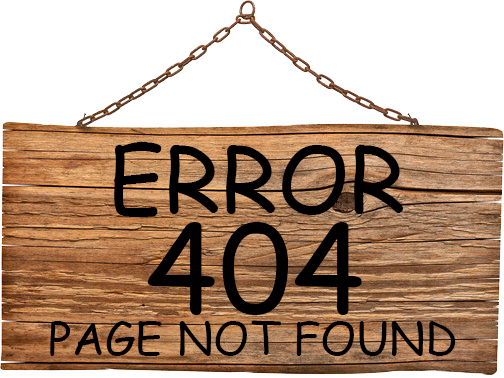
<style>
.page{position:relative;width:504px;height:378px;background:#ffffff}
.page>*{position:absolute;margin:0}
.t1{font:90px "ComicSansMS";color:#000000;text-transform:uppercase}
.t2{font:120px "ComicSansMS";color:#000000;text-transform:uppercase}
.t3{font:45px "ComicSansMS";color:#000000;text-transform:uppercase}
</style>
<div class="page">
<p class="t1" style="left:114px;top:142px;width:289px;height:75px">Error</p>
<p class="t2" style="left:147px;top:222px;width:215px;height:93px">404</p>
<p class="t3" style="left:50px;top:320px;width:406px;height:36px">Page not found</p>
</div>
